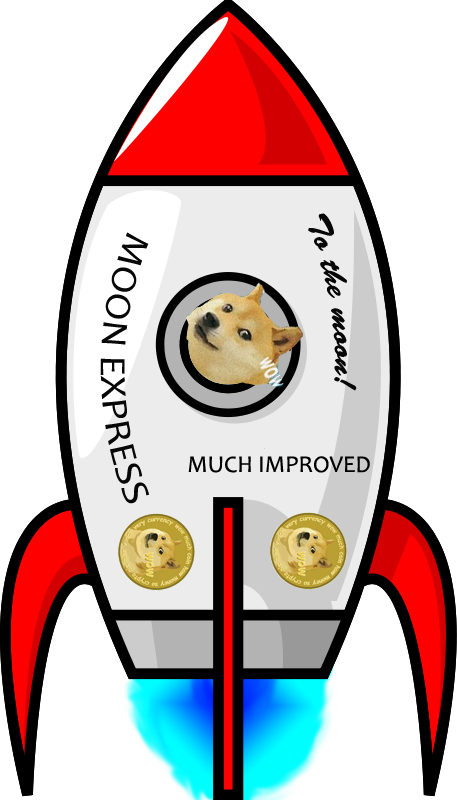
<style>
.page{position:relative;width:457px;height:800px;background:#ffffff}
.page>*{position:absolute;margin:0}
.t1{font:32.2px "BrushScriptStd";color:#070707}
.t2{font:36.7px "Candara";color:#070707}
.t3{font:24px "Candara";color:#000000}
</style>
<div class="page">
<p class="t1" style="left:308px;top:213px;width:49px;height:178px;rotate:80deg">To the moon!</p>
<p class="t2" style="left:100px;top:232px;width:49px;height:272px;rotate:90deg">MOON EXPRESS</p>
<p class="t3" style="left:188px;top:456px;width:182px;height:17px">MUCH IMPROVED</p>
</div>
